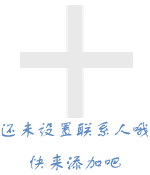
<style>
.page{position:relative;width:150px;height:175px;background:#ffffff}
.page>*{position:absolute;margin:0}
.t1{font:19px "FZSTK--GBK1-0";color:#5b8ac4}
</style>
<div class="page">
<p class="t1" style="left:1px;top:121px;width:147px;height:50px;text-align:center">还未设置联系人哦<br>快来添加吧</p>
</div>
